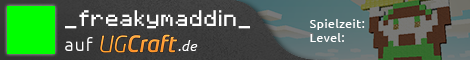
<style>
.page{position:relative;width:470px;height:60px}
.page>*{position:absolute;margin:0}
.t1{font:18px "Minecraft";letter-spacing:0.05em;color:#ffffff}
.t2{font:12px "Ubuntu";letter-spacing:0.05em;color:#ffffff}
.t3{font:18px "Ubuntu-Light";letter-spacing:0.05em;color:#ffffff}
.t4{font:14px "Ubuntu-LightItalic";letter-spacing:0.05em;color:#ffffff}
</style>
<div class="page">
<p class="t1" style="left:65px;top:10px;width:185px;height:19px">_freakymaddin_</p>
<p class="t2" style="left:310px;top:19px;width:55px;height:23px">Spielzeit:<br>Level:</p>
<p class="t3" style="left:65px;top:37px;width:28px;height:14px">auf</p>
<p class="t4" style="left:178px;top:40px;width:20px;height:11px">.de</p>
</div>
